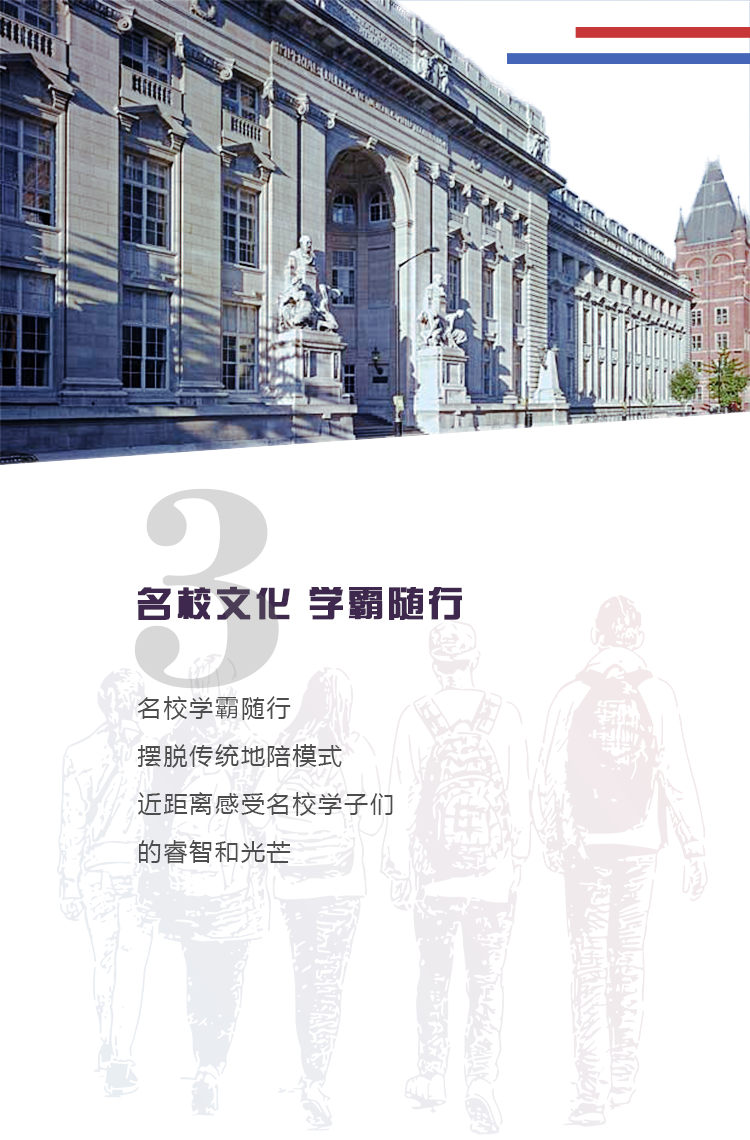
<style>
.page{position:relative;width:750px;height:1140px;background:#ffffff}
.page>*{position:absolute;margin:0}
.t1{font:36px "FZZYJW--GB1-0";letter-spacing:0.075em;color:#3e284e;font-weight:bold}
.t2{font:24px/48px "MicrosoftYaHei";letter-spacing:0.075em;color:#4d4d4d}
</style>
<div class="page">
<p class="t1" style="left:137px;top:586px;width:325px;height:34px">名校文化 学霸随行</p>
<p class="t2" style="left:137px;top:696px;width:256px;height:168px">名校学霸随行<br>摆脱传统地陪模式<br>近距离感受名校学子们<br>的睿智和光芒</p>
</div>
